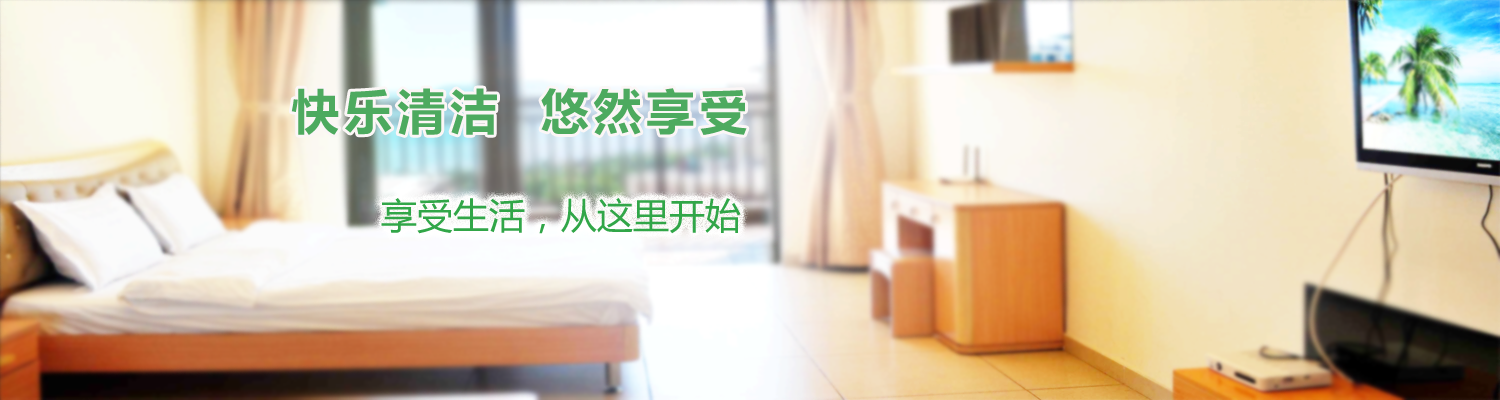
<style>
.page{position:relative;width:1500px;height:400px}
.page>*{position:absolute;margin:0}
.t1{font:48px "MicrosoftYaHei-Bold";letter-spacing:0.1em;color:#4daa5f}
.t2{font:36px "MicrosoftYaHei";color:#31a648}
</style>
<div class="page">
<p class="t1" style="left:291px;top:88px;width:456px;height:48px">快乐清洁  悠然享受</p>
<p class="t2" style="left:381px;top:198px;width:360px;height:36px">享受生活，从这里开始</p>
</div>
